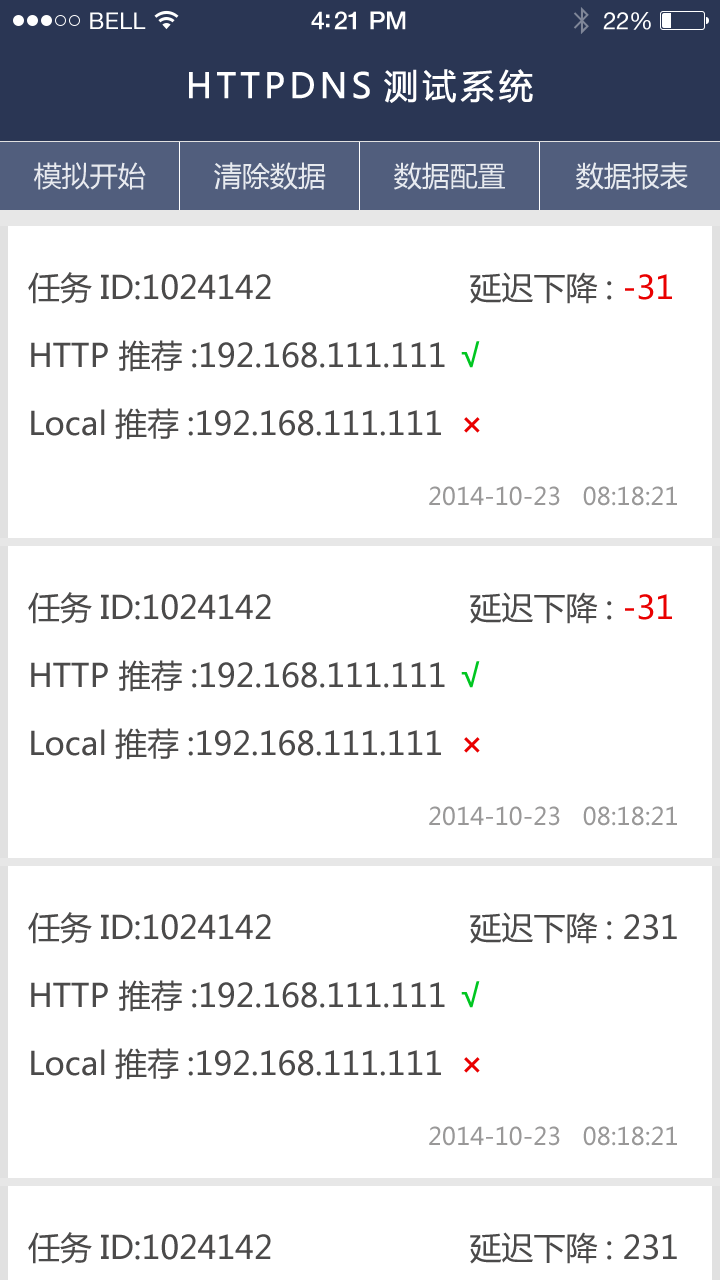
<style>
.page{position:relative;width:720px;height:1280px;background:#ffffff}
.page>*{position:absolute;margin:0}
.t1{font:23px "HelveticaNeue";letter-spacing:0.02em;color:#ffffff}
.t2{font:25px "HelveticaNeue-Medium";letter-spacing:-0.02em;color:#ffffff}
.t3{font:24px "HelveticaNeue";letter-spacing:-0.02em;color:#ffffff}
.t4{font:34px "MicrosoftYaHei";letter-spacing:0.1em;color:#ffffff;font-weight:bold}
.t5{font:28px "MicrosoftYaHei";color:#e8ebf0}
.t6{font:28px "MicrosoftYaHei";color:#e7eaef}
.t7{font:32px/34px "MicrosoftYaHei";color:#4b4a4a}
.t8{font:32px/34px "MicrosoftYaHei";color:#e90000}
.t9{font:32px/34px "MicrosoftYaHei";color:#00c621;font-weight:bold}
.t10{font:32px/34px "MicrosoftYaHei";color:#e90000;font-weight:bold}
.t11{font:24px "MicrosoftYaHei";color:#999898}
</style>
<div class="page">
<p class="t1" style="left:90px;top:12px;width:56px;height:17px">BELL</p>
<p class="t2" style="left:311px;top:11px;width:95px;height:19px">4:21 PM</p>
<p class="t3" style="left:603px;top:12px;width:48px;height:18px">22%</p>
<p class="t4" style="left:189px;top:69px;width:344px;height:34px">HTTPDNS测试系统</p>
<p class="t5" style="left:34px;top:162px;width:112px;height:28px">模拟开始</p>
<p class="t6" style="left:214px;top:162px;width:112px;height:28px">清除数据</p>
<p class="t6" style="left:394px;top:162px;width:111px;height:28px">数据配置</p>
<p class="t6" style="left:576px;top:162px;width:112px;height:28px">数据报表</p>
<p class="t7" style="left:28px;top:272px;width:644px;height:168px">任务ID:1024142                     延迟下降: <span class="t8">-31<br></span><br>HTTP 推荐:192.168.111.111 <span class="t9">√</span> <br><br>Local推荐:192.168.111.111 <span class="t10">×</span></p>
<p class="t11" style="left:429px;top:486px;width:248px;height:20px">2014-10-23   08:18:21</p>
<p class="t7" style="left:28px;top:592px;width:644px;height:168px">任务ID:1024142                     延迟下降: <span class="t8">-31<br></span><br>HTTP 推荐:192.168.111.111 <span class="t9">√</span> <br><br>Local推荐:192.168.111.111 <span class="t10">×</span></p>
<p class="t11" style="left:429px;top:806px;width:248px;height:20px">2014-10-23   08:18:21</p>
<p class="t7" style="left:28px;top:912px;width:649px;height:168px">任务ID:1024142                     延迟下降: 231<br><br>HTTP 推荐:192.168.111.111 <span class="t9">√</span> <br><br>Local推荐:192.168.111.111 <span class="t10">×</span></p>
<p class="t11" style="left:429px;top:1126px;width:248px;height:20px">2014-10-23   08:18:21</p>
</div>
